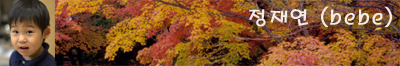
<style>
.page{position:relative;width:400px;height:66px}
.page>*{position:absolute;margin:0}
.t1{font:20px "H2porM";letter-spacing:0.025em;color:#f3ece6;font-weight:bold}
</style>
<div class="page">
<p class="t1" style="left:249px;top:6px;width:143px;height:21px">정재연 (bebe)</p>
</div>
